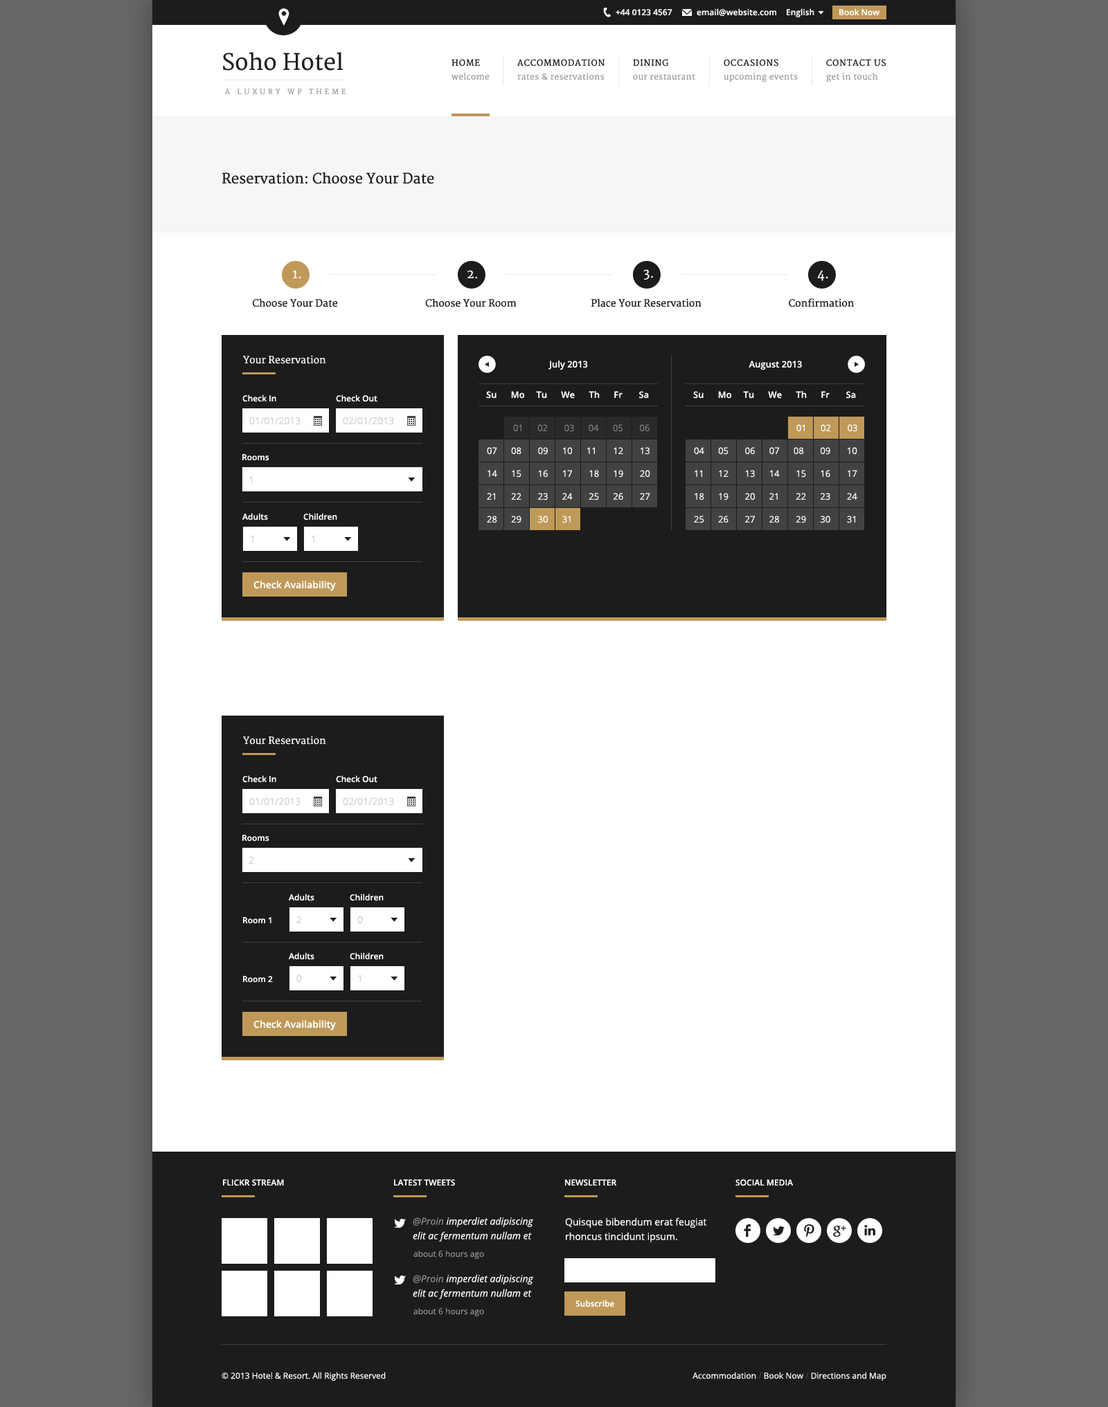
<style>
.page{position:relative;width:1108px;height:1407px;background:#ffffff}
.page>*{position:absolute;margin:0}
.t1{font:8.3px "OpenSans-Semibold";color:#ffffff}
.t2{font:22.2px "Merriweather";color:#231f20}
.t3{font:8.3px "Merriweather";letter-spacing:0.075em;color:#1c1c1c;text-transform:uppercase}
.t4{font:8.3px "Merriweather";letter-spacing:0.025em;color:#a09d9d}
.t5{font:6.9px "Merriweather";letter-spacing:0.4em;color:#a09d9d;text-transform:uppercase}
.t6{font:13.8px "Merriweather";color:#1c1c1c}
.t7{font:12.5px "Merriweather";color:#ffffff}
.t8{font:9.7px "Merriweather";color:#1c1c1c}
.t9{font:9.7px "Merriweather";color:#ffffff}
.t10{font:9px "OpenSans-Semibold";color:#ffffff}
.t11{font:9.7px "OpenSans";color:#d3d3d3}
.t12{font:9px "OpenSans";color:#7b7b7b}
.t13{font:9px "OpenSans";color:#ffffff}
.t14{font:9.7px "OpenSans-Semibold";color:#ffffff}
.t15{font:8.3px "OpenSans-Semibold";color:#ffffff;text-transform:uppercase}
.t16{font:9.7px/14.5px "OpenSans-Italic";color:#ffffff}
.t17{font:9.7px/14.5px "OpenSans-Italic";color:#8b8b8b}
.t18{font:9.7px/14.5px "OpenSans";color:#ffffff}
.t19{font:8.3px "OpenSans";color:#8b8b8b}
.t20{font:8.3px "OpenSans";color:#ffffff}
.t21{font:8.3px "OpenSans";color:#424242}
</style>
<div class="page">
<p class="t1" style="left:615px;top:9px;width:57px;height:7px">+44 0123 4567</p>
<p class="t1" style="left:696px;top:8px;width:80px;height:8px">email@website.com</p>
<p class="t1" style="left:786px;top:8px;width:28px;height:9px">English</p>
<p class="t1" style="left:839px;top:8px;width:40px;height:8px">Book Now</p>
<p class="t2" style="left:223px;top:52px;width:120px;height:19px">Soho Hotel</p>
<p class="t3" style="left:451px;top:59px;width:29px;height:7px">Home</p>
<p class="t3" style="left:517px;top:59px;width:87px;height:7px">Accommodation</p>
<p class="t3" style="left:633px;top:59px;width:35px;height:7px">Dining</p>
<p class="t3" style="left:723px;top:59px;width:55px;height:7px">Occasions</p>
<p class="t3" style="left:826px;top:59px;width:59px;height:7px">Contact Us</p>
<p class="t4" style="left:451px;top:73px;width:38px;height:7px">welcome</p>
<p class="t4" style="left:517px;top:73px;width:87px;height:7px">rates &amp; reservations</p>
<p class="t4" style="left:633px;top:73px;width:62px;height:7px">our restaurant</p>
<p class="t4" style="left:723px;top:73px;width:75px;height:9px">upcoming events</p>
<p class="t4" style="left:826px;top:73px;width:52px;height:9px">get in touch</p>
<p class="t5" style="left:224px;top:89px;width:121px;height:6px">A Luxury WP Theme</p>
<p class="t6" style="left:222px;top:172px;width:212px;height:12px">Reservation: Choose Your Date</p>
<p class="t7" style="left:293px;top:270px;width:8px;height:9px">1.</p>
<p class="t7" style="left:467px;top:270px;width:11px;height:9px">2.</p>
<p class="t7" style="left:643px;top:269px;width:10px;height:11px">3.</p>
<p class="t7" style="left:817px;top:270px;width:11px;height:11px">4.</p>
<p class="t8" style="left:252px;top:298px;width:85px;height:9px">Choose Your Date</p>
<p class="t8" style="left:425px;top:298px;width:91px;height:9px">Choose Your Room</p>
<p class="t8" style="left:591px;top:298px;width:110px;height:9px">Place Your Reservation</p>
<p class="t8" style="left:789px;top:298px;width:65px;height:9px">Confirmation</p>
<p class="t9" style="left:243px;top:355px;width:83px;height:9px">Your Reservation</p>
<p class="t10" style="left:548px;top:361px;width:40px;height:9px">July 2013</p>
<p class="t10" style="left:748px;top:361px;width:54px;height:9px">August 2013</p>
<p class="t1" style="left:242px;top:395px;width:34px;height:7px">Check In</p>
<p class="t1" style="left:336px;top:395px;width:41px;height:7px">Check Out</p>
<p class="t10" style="left:486px;top:391px;width:163px;height:8px">Su      Mo     Tu      We      Th      Fr       Sa</p>
<p class="t10" style="left:693px;top:391px;width:163px;height:8px">Su      Mo     Tu      We      Th      Fr       Sa</p>
<p class="t11" style="left:249px;top:417px;width:51px;height:8px">01/01/2013</p>
<p class="t11" style="left:343px;top:417px;width:51px;height:8px">02/01/2013</p>
<p class="t12" style="left:513px;top:424px;width:136px;height:8px">01      02       03      04      05       06</p>
<p class="t13" style="left:796px;top:424px;width:61px;height:8px">01      02       03</p>
<p class="t13" style="left:487px;top:447px;width:163px;height:8px">07      08       09      10      11       12       13</p>
<p class="t13" style="left:694px;top:447px;width:163px;height:8px">04      05       06      07      08       09       10</p>
<p class="t1" style="left:242px;top:454px;width:27px;height:7px">Rooms</p>
<p class="t13" style="left:487px;top:470px;width:163px;height:8px">14      15       16      17       18      19       20</p>
<p class="t13" style="left:694px;top:470px;width:163px;height:8px">11      12       13      14       15      16       17</p>
<p class="t11" style="left:249px;top:476px;width:3px;height:7px">1</p>
<p class="t13" style="left:487px;top:493px;width:163px;height:8px">21      22       23      24       25      26       27</p>
<p class="t13" style="left:694px;top:493px;width:163px;height:8px">18      19       20      21       22      23       24</p>
<p class="t1" style="left:242px;top:513px;width:26px;height:8px">Adults</p>
<p class="t1" style="left:303px;top:513px;width:34px;height:8px">Children</p>
<p class="t13" style="left:487px;top:516px;width:83px;height:7px">28      29       30      31</p>
<p class="t13" style="left:694px;top:516px;width:161px;height:7px">25      26       27      28       29      30       31</p>
<p class="t11" style="left:251px;top:536px;width:2px;height:7px">1</p>
<p class="t11" style="left:312px;top:536px;width:2px;height:7px">1</p>
<p class="t14" style="left:253px;top:581px;width:83px;height:10px">Check Availability</p>
<p class="t9" style="left:243px;top:736px;width:83px;height:9px">Your Reservation</p>
<p class="t1" style="left:242px;top:775px;width:34px;height:8px">Check In</p>
<p class="t1" style="left:336px;top:775px;width:41px;height:8px">Check Out</p>
<p class="t11" style="left:249px;top:798px;width:51px;height:8px">01/01/2013</p>
<p class="t11" style="left:343px;top:798px;width:51px;height:8px">02/01/2013</p>
<p class="t1" style="left:242px;top:835px;width:27px;height:7px">Rooms</p>
<p class="t11" style="left:249px;top:856px;width:5px;height:8px">2</p>
<p class="t1" style="left:288px;top:894px;width:26px;height:7px">Adults</p>
<p class="t1" style="left:350px;top:894px;width:34px;height:7px">Children</p>
<p class="t1" style="left:243px;top:917px;width:28px;height:7px">Room 1</p>
<p class="t11" style="left:296px;top:916px;width:6px;height:8px">2</p>
<p class="t11" style="left:357px;top:916px;width:6px;height:8px">0</p>
<p class="t1" style="left:288px;top:953px;width:26px;height:7px">Adults</p>
<p class="t1" style="left:350px;top:953px;width:34px;height:7px">Children</p>
<p class="t1" style="left:243px;top:976px;width:30px;height:7px">Room 2</p>
<p class="t11" style="left:296px;top:975px;width:6px;height:8px">0</p>
<p class="t11" style="left:358px;top:975px;width:3px;height:7px">1</p>
<p class="t14" style="left:253px;top:1020px;width:83px;height:11px">Check Availability</p>
<p class="t15" style="left:223px;top:1180px;width:61px;height:7px">Flickr Stream</p>
<p class="t15" style="left:394px;top:1180px;width:61px;height:7px">Latest Tweets</p>
<p class="t15" style="left:565px;top:1180px;width:52px;height:7px">Newsletter</p>
<p class="t15" style="left:735px;top:1180px;width:58px;height:7px">Social Media</p>
<p class="t16" style="left:413px;top:1217px;width:121px;height:25px"><span class="t17">@Proin </span>imperdiet adipiscing elit ac fermentum nullam et</p>
<p class="t18" style="left:565px;top:1218px;width:142px;height:25px">Quisque bibendum erat feugiat rhoncus tincidunt ipsum.</p>
<p class="t19" style="left:413px;top:1250px;width:71px;height:9px">about 6 hours ago</p>
<p class="t16" style="left:413px;top:1275px;width:121px;height:24px"><span class="t17">@Proin</span> imperdiet adipiscing elit ac fermentum nullam et</p>
<p class="t1" style="left:575px;top:1300px;width:39px;height:8px">Subscribe</p>
<p class="t19" style="left:413px;top:1308px;width:71px;height:9px">about 6 hours ago</p>
<p class="t20" style="left:222px;top:1372px;width:164px;height:9px">© 2013 Hotel &amp; Resort. All Rights Reserved</p>
<p class="t20" style="left:692px;top:1372px;width:194px;height:9px">Accommodation <span class="t21">/</span> Book Now <span class="t21">/</span> Directions and Map</p>
</div>
